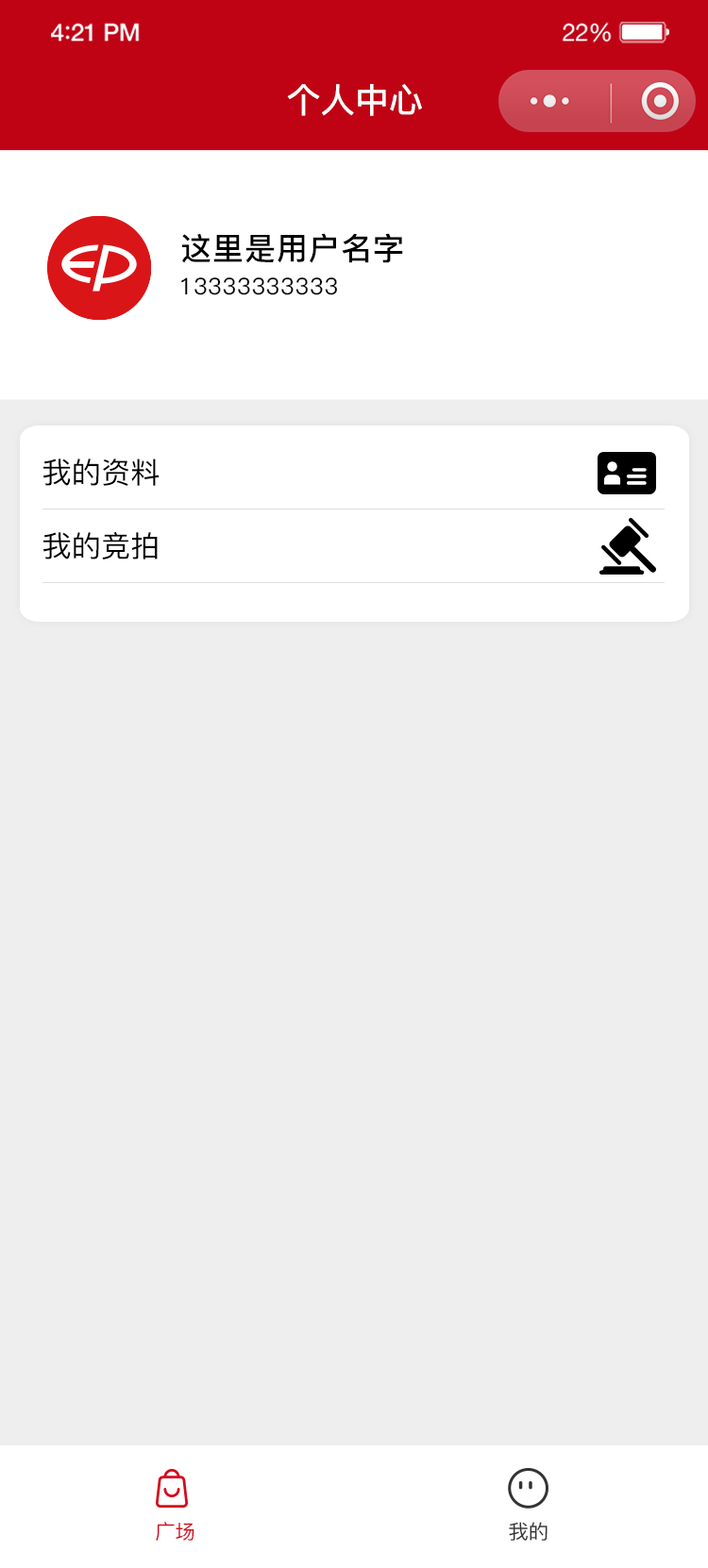
<style>
.page{position:relative;width:708px;height:1568px;background:#eeeeee}
.page>*{position:absolute;margin:0}
.t1{font:34.1px "PingFang-SC-Bold";color:#ffffff}
.t2{font:31.1px "PingFang-SC-Bold";letter-spacing:0.031em;color:#000000}
.t3{font:23px "PingFang-SC-Medium";letter-spacing:0.031em;color:#000000}
.t4{font:29.4px "PingFang-SC-Medium";color:#000000}
.t5{font:20.2px "PingFang-SC-Medium";color:#d5091d}
.t6{font:20.2px "PingFang-SC-Medium";color:#333333}
</style>
<div class="page">
<p class="t1" style="left:287px;top:84px;width:135px;height:32px">个人中心</p>
<p class="t2" style="left:182px;top:233px;width:221px;height:30px">这里是用户名字</p>
<p class="t3" style="left:181px;top:277px;width:156px;height:18px">13333333333</p>
<p class="t4" style="left:43px;top:459px;width:116px;height:27px">我的资料</p>
<p class="t4" style="left:43px;top:532px;width:115px;height:27px">我的竞拍</p>
<p class="t5" style="left:156px;top:1522px;width:38px;height:20px">广场</p>
<p class="t6" style="left:509px;top:1522px;width:38px;height:19px">我的</p>
</div>
